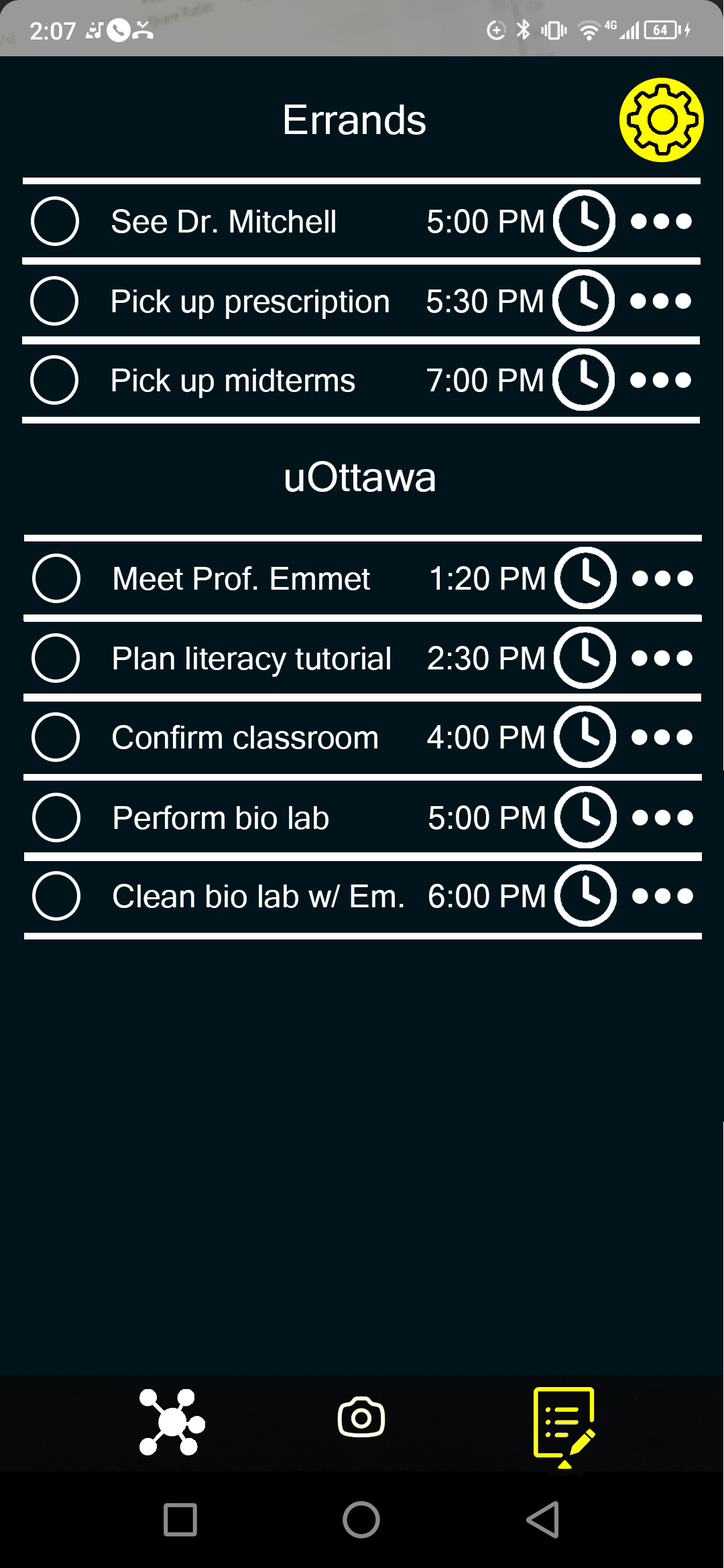
<style>
.page{position:relative;width:724px;height:1568px;background:#01141c}
.page>*{position:absolute;margin:0}
.t1{font:41.5px "MicrosoftSansSerif";color:#ffffff}
.t2{font:32.2px "MicrosoftSansSerif";color:#ffffff}
</style>
<div class="page">
<p class="t1" style="left:285px;top:105px;width:141px;height:30px">Errands</p>
<p class="t2" style="left:112px;top:209px;width:223px;height:24px">See Dr. Mitchell</p>
<p class="t2" style="left:428px;top:209px;width:115px;height:24px">5:00 PM</p>
<p class="t2" style="left:112px;top:289px;width:277px;height:30px">Pick up prescription</p>
<p class="t2" style="left:427px;top:289px;width:116px;height:24px">5:30 PM</p>
<p class="t2" style="left:112px;top:369px;width:243px;height:29px">Pick up midterms</p>
<p class="t2" style="left:427px;top:368px;width:116px;height:24px">7:00 PM</p>
<p class="t1" style="left:285px;top:461px;width:150px;height:31px">uOttawa</p>
<p class="t2" style="left:114px;top:566px;width:256px;height:24px">Meet Prof. Emmet</p>
<p class="t2" style="left:431px;top:566px;width:114px;height:24px">1:20 PM</p>
<p class="t2" style="left:113px;top:647px;width:277px;height:30px">Plan literacy tutorial</p>
<p class="t2" style="left:428px;top:646px;width:116px;height:24px">2:30 PM</p>
<p class="t2" style="left:113px;top:725px;width:264px;height:24px">Confirm classroom</p>
<p class="t2" style="left:427px;top:725px;width:117px;height:24px">4:00 PM</p>
<p class="t2" style="left:114px;top:805px;width:214px;height:25px">Perform bio lab</p>
<p class="t2" style="left:429px;top:805px;width:116px;height:25px">5:00 PM</p>
<p class="t2" style="left:113px;top:884px;width:290px;height:24px">Clean bio lab w/ Em.</p>
<p class="t2" style="left:429px;top:884px;width:116px;height:24px">6:00 PM</p>
</div>
